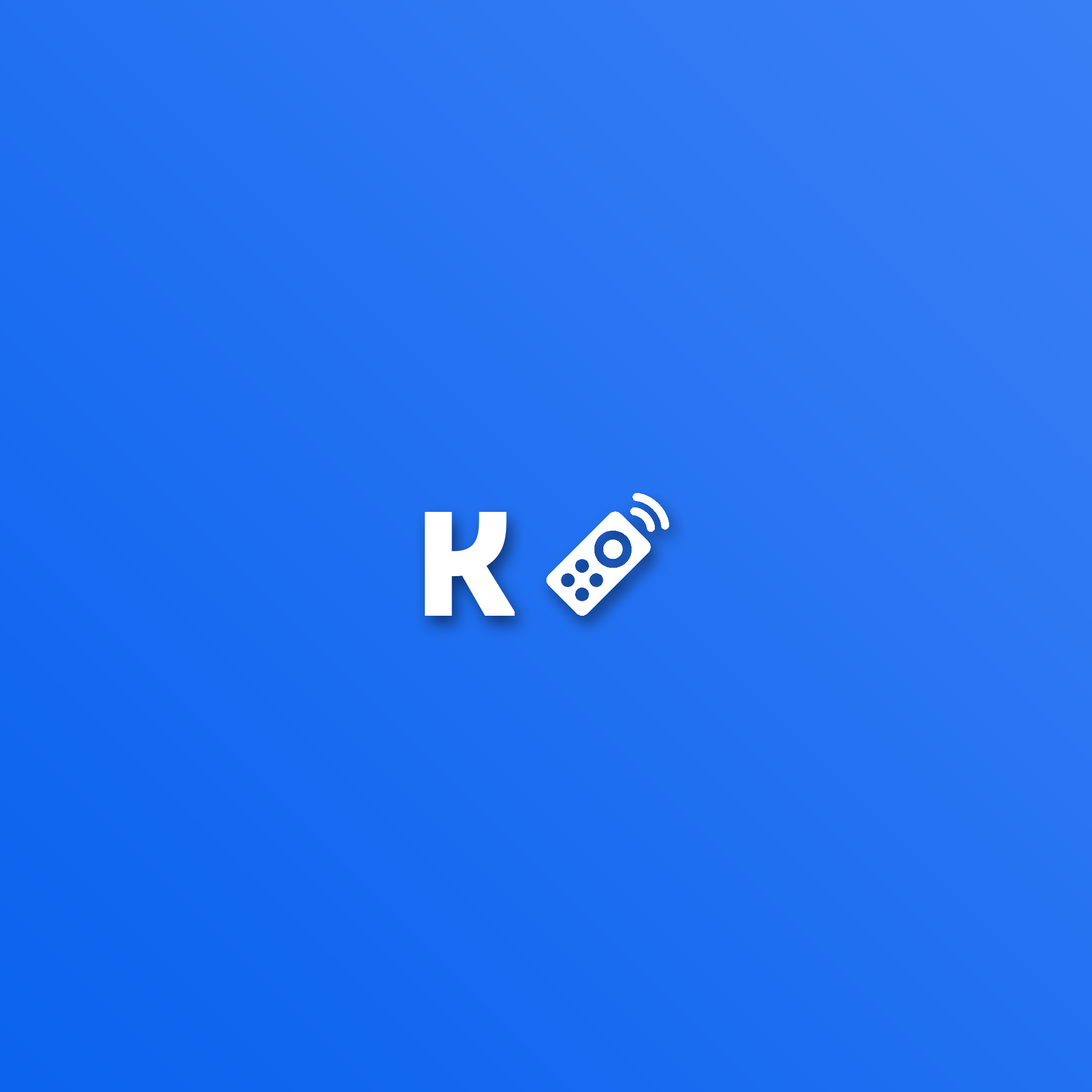
<style>
.page{position:relative;width:1092px;height:1092px}
.page>*{position:absolute;margin:0}
.t1{font:148.4px "Intro";color:#ffffff}
</style>
<div class="page">
<p class="t1" style="left:425px;top:512px;width:90px;height:104px">K</p>
</div>
